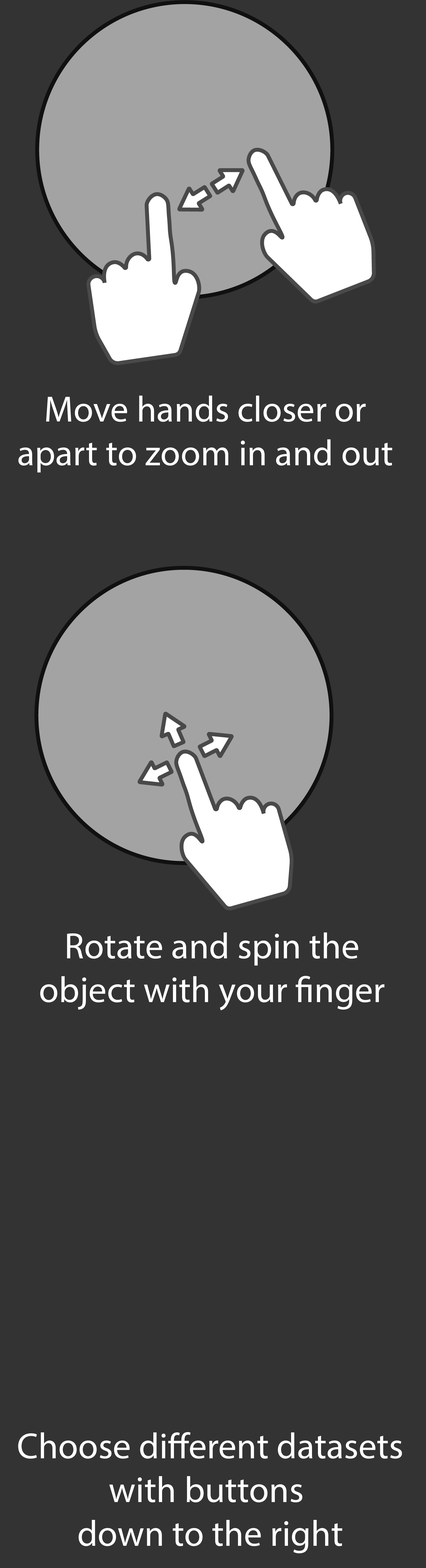
<style>
.page{position:relative;width:426px;height:1568px;background:#333333}
.page>*{position:absolute;margin:0}
.t1{font:36.5px "MyriadPro-Regular";color:#ffffff}
</style>
<div class="page">
<p class="t1" style="left:18px;top:396px;width:374px;height:76px;text-align:center">Move hands closer or<br>apart to zoom in and out</p>
<p class="t1" style="left:40px;top:932px;width:345px;height:79px;text-align:center">Rotate and spin the<br>object with your finger</p>
<p class="t1" style="left:18px;top:1432px;width:384px;height:121px;text-align:center">Choose different datasets<br>with buttons <br>down to the right</p>
</div>
